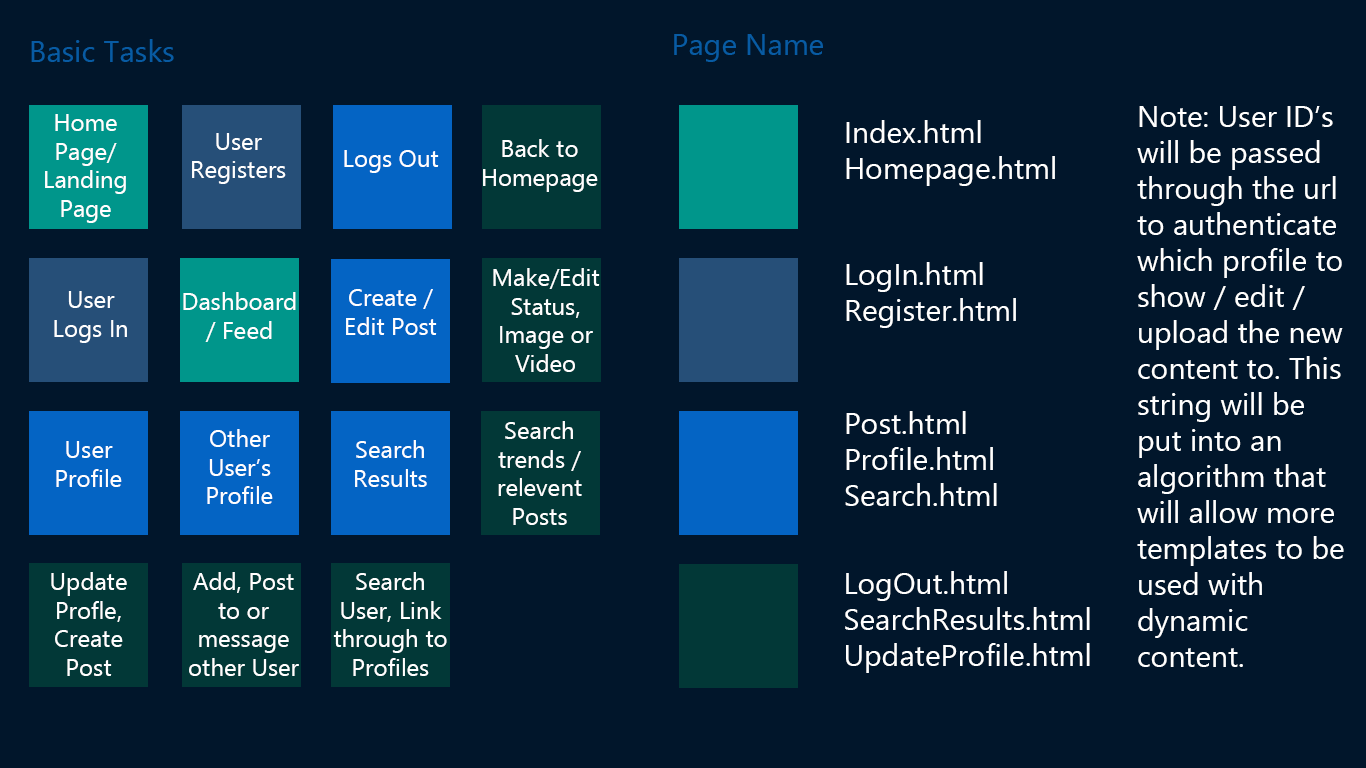
<style>
.page{position:relative;width:1366px;height:768px;background:#01162b}
.page>*{position:absolute;margin:0}
.t1{font:30px "SegoeUI";color:#085ba3}
.t2{font:30px "SegoeUI";color:#ffffff}
.t3{font:24px "SegoeUI";color:#ffffff}
</style>
<div class="page">
<p class="t1" style="left:31px;top:39px;width:143px;height:23px">Basic Tasks</p>
<p class="t1" style="left:674px;top:34px;width:149px;height:28px">Page Name</p>
<p class="t2" style="left:1137px;top:106px;width:207px;height:561px">Note: User ID’s will be passed through the url to authenticate which profile to show / edit / upload the new content to. This string will be put into an algorithm that will allow more templates to be used with dynamic content.</p>
<p class="t3" style="left:45px;top:114px;width:81px;height:109px;text-align:center">Home Page/ Landing Page</p>
<p class="t2" style="left:846px;top:120px;width:209px;height:66px">Index.html<br>Homepage.html</p>
<p class="t3" style="left:192px;top:133px;width:94px;height:51px;text-align:center">User Registers</p>
<p class="t3" style="left:344px;top:150px;width:95px;height:23px">Logs Out</p>
<p class="t3" style="left:483px;top:139px;width:115px;height:53px;text-align:center">Back to Homepage</p>
<p class="t3" style="left:493px;top:268px;width:107px;height:104px;text-align:center">Make/EditStatus, Image or Video</p>
<p class="t2" style="left:846px;top:262px;width:170px;height:66px">LogIn.html<br>Register.html</p>
<p class="t3" style="left:54px;top:291px;width:73px;height:52px;text-align:center">User <br>Logs In</p>
<p class="t3" style="left:183px;top:292px;width:113px;height:50px;text-align:center">Dashboard/ Feed</p>
<p class="t3" style="left:346px;top:289px;width:91px;height:46px;text-align:center">Create / Edit Post</p>
<p class="t2" style="left:845px;top:411px;width:152px;height:95px">Post.html<br>Profile.html<br>Search.html</p>
<p class="t3" style="left:498px;top:421px;width:84px;height:104px;text-align:center">Search trends / relevent Posts</p>
<p class="t3" style="left:207px;top:429px;width:66px;height:75px;text-align:center">Other User’s Profile</p>
<p class="t3" style="left:56px;top:441px;width:66px;height:46px;text-align:center">User Profile</p>
<p class="t3" style="left:355px;top:440px;width:72px;height:47px;text-align:center">Search Results</p>
<p class="t3" style="left:51px;top:572px;width:76px;height:104px;text-align:center">Update Profle, Create Post</p>
<p class="t3" style="left:189px;top:572px;width:110px;height:104px;text-align:center">Add, Post to or message other User</p>
<p class="t3" style="left:333px;top:572px;width:114px;height:104px;text-align:center">Search User, Link through to Profiles</p>
<p class="t2" style="left:845px;top:571px;width:245px;height:102px">LogOut.html<br>SearchResults.html<br>UpdateProfile.html</p>
</div>
